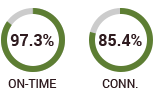
<style>
.page{position:relative;width:153px;height:88px;background:#ffffff}
.page>*{position:absolute;margin:0}
.t1{font:16px "Roboto-Bold";color:#2f1b1f}
.t2{font:12px "Roboto-Regular";color:#2f1b1f;text-transform:uppercase}
</style>
<div class="page">
<p class="t1" style="left:10px;top:34px;width:44px;height:12px">97.3%</p>
<p class="t1" style="left:99px;top:34px;width:43px;height:12px">85.4%</p>
<p class="t2" style="left:8px;top:79px;width:49px;height:9px">On-Time</p>
<p class="t2" style="left:102px;top:79px;width:36px;height:9px">Conn.</p>
</div>
